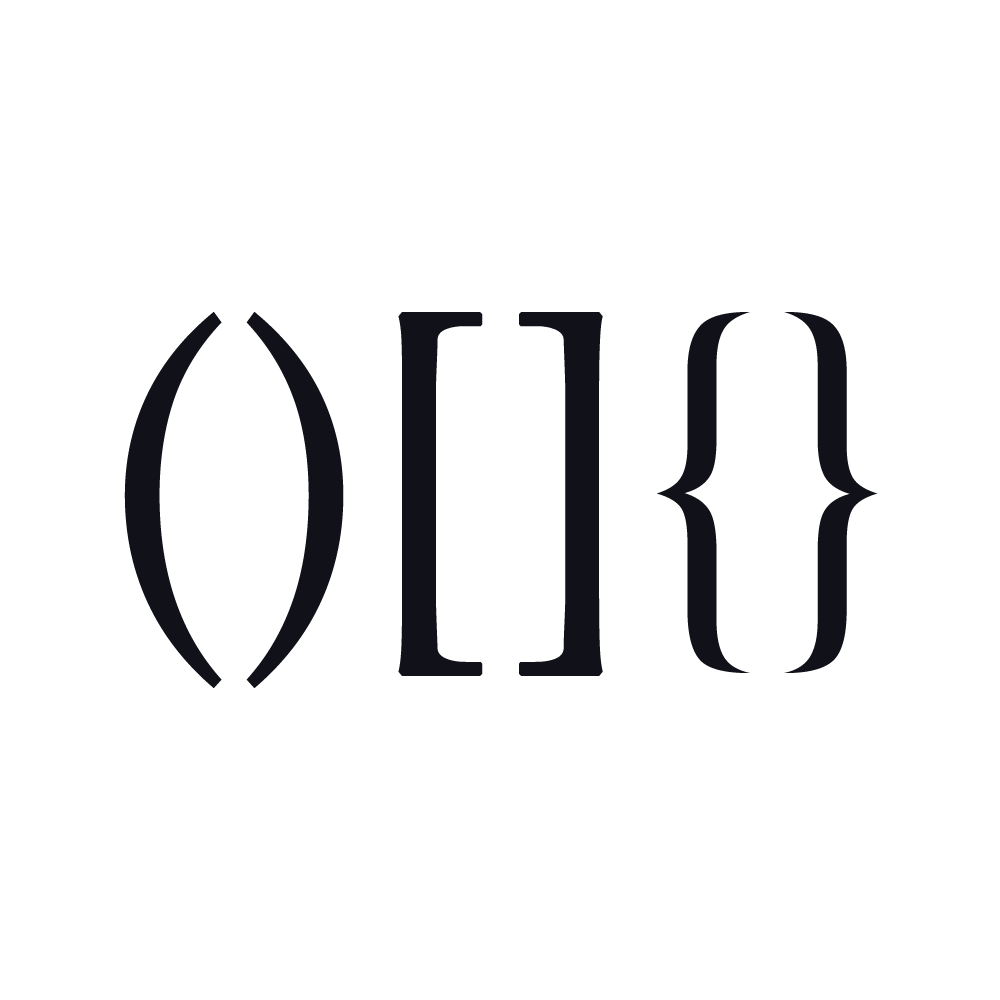
<style>
.page{position:relative;width:1000px;height:1000px;background:#ffffff}
.page>*{position:absolute;margin:0}
.t1{font:400px "Palatino-Roman";color:#111119}
</style>
<div class="page">
<p class="t1" style="left:124px;top:312px;width:754px;height:376px">()[]{}</p>
</div>
